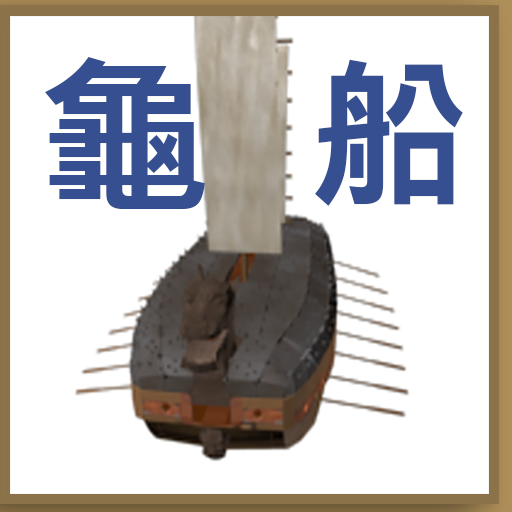
<style>
.page{position:relative;width:512px;height:512px;background:#ffffff}
.page>*{position:absolute;margin:0}
.t1{font:170.2px "MalgunGothicBold";color:#354f90}
.t2{font:158.7px "MalgunGothicBold";color:#354f90}
</style>
<div class="page">
<p class="t1" style="left:45px;top:57px;width:160px;height:152px">龜</p>
<p class="t2" style="left:315px;top:59px;width:148px;height:147px">船</p>
</div>
